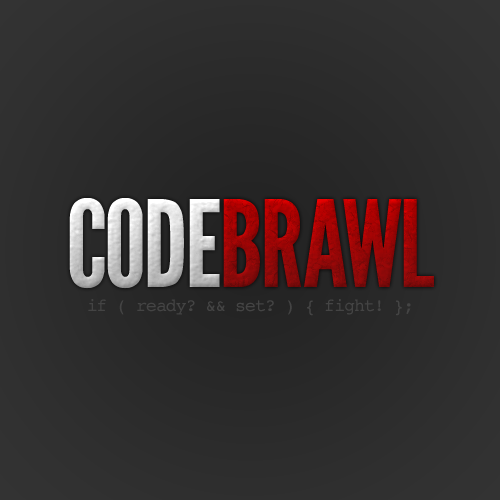
<style>
.page{position:relative;width:500px;height:500px}
.page>*{position:absolute;margin:0}
.t1{font:120px "LeagueGothic";letter-spacing:-0.025em}
.t2{font:120px "LeagueGothic"}
.t3{font:120px "LeagueGothic";letter-spacing:-0.05em}
.t4{font:18px "Courier";letter-spacing:-0.05em;color:#444444}
</style>
<div class="page">
<p class="t1" style="left:69px;top:198px;width:365px;height:91px">CODEB<span class="t2">R</span><span class="t3">A</span>WL</p>
<p class="t4" style="left:88px;top:299px;width:323px;height:17px">if ( ready? &amp;&amp; set? ) { fight! };</p>
</div>
